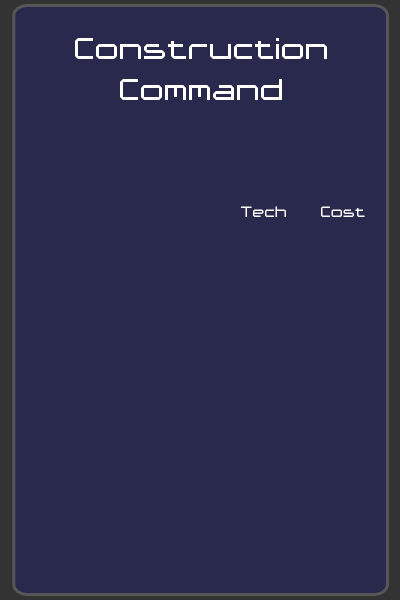
<style>
.page{position:relative;width:400px;height:600px;background:#28294d}
.page>*{position:absolute;margin:0}
.t1{font:48px "Ace-Futurism";color:#ffffff}
.t2{font:24px "Ace-Futurism";color:#ffffff}
</style>
<div class="page">
<p class="t1" style="left:75px;top:38px;width:252px;height:21px">Construction</p>
<p class="t1" style="left:120px;top:79px;width:162px;height:21px">Command</p>
<p class="t2" style="left:241px;top:206px;width:45px;height:11px">Tech</p>
<p class="t2" style="left:321px;top:206px;width:44px;height:11px">Cost</p>
</div>
